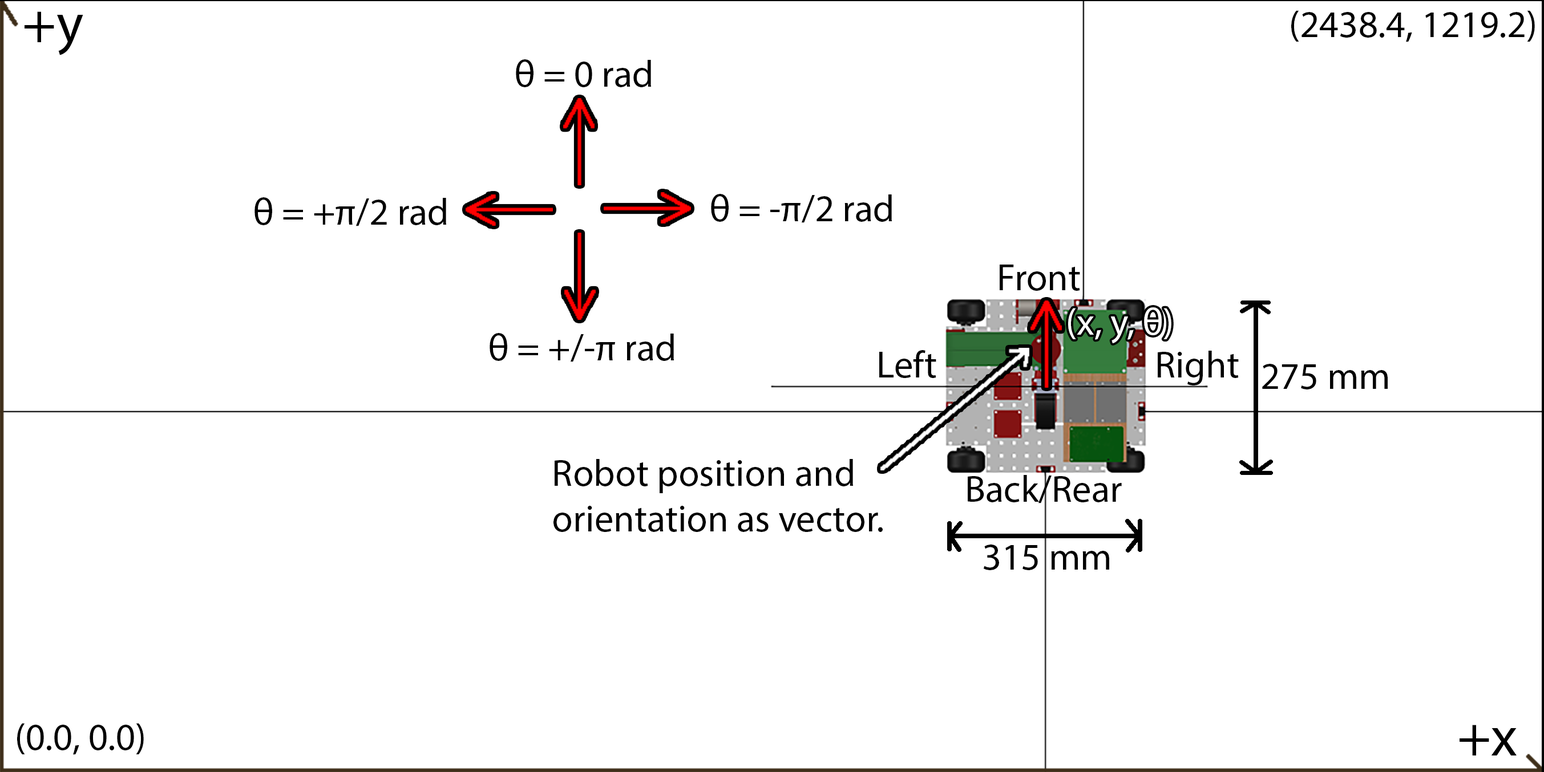
<style>
.page{position:relative;width:1544px;height:772px;background:#ffffff}
.page>*{position:absolute;margin:0}
.t1{font:57px "MyriadPro-Regular";color:#000000}
.t2{font:38px "MyriadPro-Regular";color:#000000}
.t3{font:38px "MyriadPro-Regular";color:#ffffff}
</style>
<div class="page">
<p class="t1" style="left:25px;top:11px;width:58px;height:44px">+y</p>
<p class="t2" style="left:1291px;top:10px;width:244px;height:32px">(2438.4, 1219.2)</p>
<p class="t2" style="left:516px;top:59px;width:135px;height:28px">θ = 0 rad</p>
<p class="t2" style="left:254px;top:197px;width:192px;height:29px">θ = +π/2 rad</p>
<p class="t2" style="left:711px;top:194px;width:181px;height:29px">θ = -π/2 rad</p>
<p class="t2" style="left:999px;top:265px;width:81px;height:26px">Front</p>
<p class="t3" style="left:1068px;top:307px;width:103px;height:36px">(x, y, θ)</p>
<p class="t2" style="left:489px;top:333px;width:185px;height:29px">θ = +/-π rad</p>
<p class="t2" style="left:879px;top:350px;width:360px;height:36px">Left                           Right</p>
<p class="t2" style="left:1262px;top:364px;width:125px;height:26px">275 mm</p>
<p class="t2" style="left:553px;top:459px;width:330px;height:73px">Robot position and orientation as vector.</p>
<p class="t2" style="left:968px;top:475px;width:154px;height:29px">Back/Rear</p>
<p class="t2" style="left:983px;top:545px;width:126px;height:25px">315 mm</p>
<p class="t2" style="left:17px;top:723px;width:127px;height:32px">(0.0, 0.0)</p>
<p class="t1" style="left:1459px;top:725px;width:57px;height:31px">+x</p>
</div>
